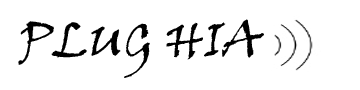
<style>
.page{position:relative;width:360px;height:90px;background:#ffffff}
.page>*{position:absolute;margin:0}
.t1{font:48px "VinerHandITC";color:#000000}
</style>
<div class="page">
<p class="t1" style="left:18px;top:19px;width:246px;height:59px">PLUG HIA</p>
</div>
